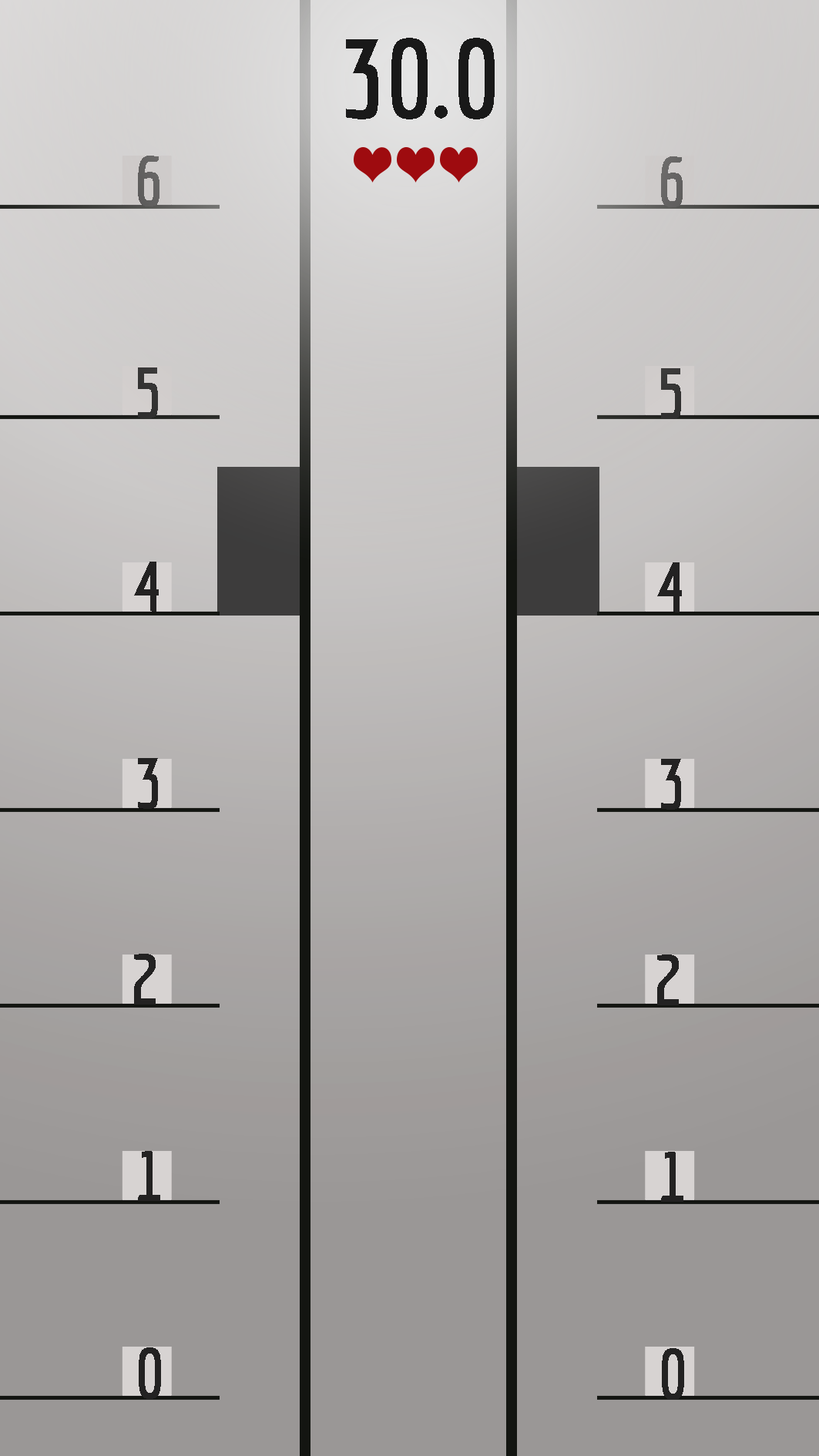
<style>
.page{position:relative;width:819px;height:1456px}
.page>*{position:absolute;margin:0}
.t1{font:112.4px "Economica-Bold";color:#191919}
.t2{font:70.6px "Economica-Bold";letter-spacing:0.04em;color:#636261}
.t3{font:70.6px "Economica-Bold";letter-spacing:0.04em;color:#666564}
.t4{font:70.6px "Economica-Bold";letter-spacing:0.04em;color:#353434}
.t5{font:70.6px "Economica-Bold";letter-spacing:0.04em;color:#363534}
.t6{font:70.6px "Economica-Bold";letter-spacing:0.04em;color:#131313}
</style>
<div class="page">
<p class="t1" style="left:346px;top:38px;width:149px;height:81px">30.0</p>
<p class="t2" style="left:138px;top:156px;width:21px;height:50px">6</p>
<p class="t3" style="left:661px;top:156px;width:22px;height:51px">6</p>
<p class="t4" style="left:138px;top:367px;width:20px;height:51px">5</p>
<p class="t5" style="left:661px;top:368px;width:20px;height:51px">5</p>
<p class="t6" style="left:134px;top:562px;width:25px;height:50px">4</p>
<p class="t6" style="left:657px;top:562px;width:25px;height:50px">4</p>
<p class="t6" style="left:138px;top:758px;width:20px;height:51px">3</p>
<p class="t6" style="left:661px;top:759px;width:20px;height:51px">3</p>
<p class="t6" style="left:134px;top:954px;width:22px;height:51px">2</p>
<p class="t6" style="left:657px;top:955px;width:22px;height:50px">2</p>
<p class="t6" style="left:138px;top:1151px;width:22px;height:50px">1</p>
<p class="t6" style="left:661px;top:1152px;width:22px;height:50px">1</p>
<p class="t6" style="left:139px;top:1347px;width:22px;height:52px">0</p>
<p class="t6" style="left:662px;top:1348px;width:22px;height:52px">0</p>
</div>
